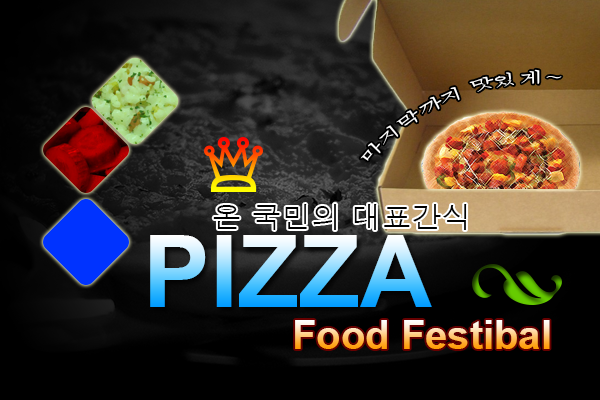
<style>
.page{position:relative;width:600px;height:400px}
.page>*{position:absolute;margin:0}
.t1{font:14px "Batang";color:#ffffff}
.t2{font:30px "Dotum";color:#000000}
.t3{font:100px "Arial-BoldMT"}
.t4{font:40px "Arial-BoldMT"}
</style>
<div class="page">
<p class="t1" style="left:360px;top:69px;width:202px;height:92px;rotate:-23deg">마지막까지 맛있게~</p>
<p class="t2" style="left:213px;top:204px;width:254px;height:26px">온 국민의 대표간식</p>
<p class="t3" style="left:150px;top:235px;width:282px;height:72px">PIZZA</p>
<p class="t4" style="left:295px;top:320px;width:255px;height:29px;text-align:center">Food Festibal<br><br>ffFF<span class="t3">F</span></p>
</div>
